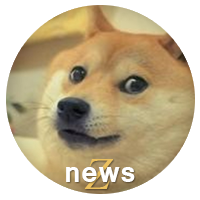
<style>
.page{position:relative;width:200px;height:200px;background:#ffffff}
.page>*{position:absolute;margin:0}
.t1{font:27.7px "Mangal-Bold";letter-spacing:0.025em;color:#ffffff}
</style>
<div class="page">
<p class="t1" style="left:66px;top:167px;width:69px;height:15px">news</p>
</div>
